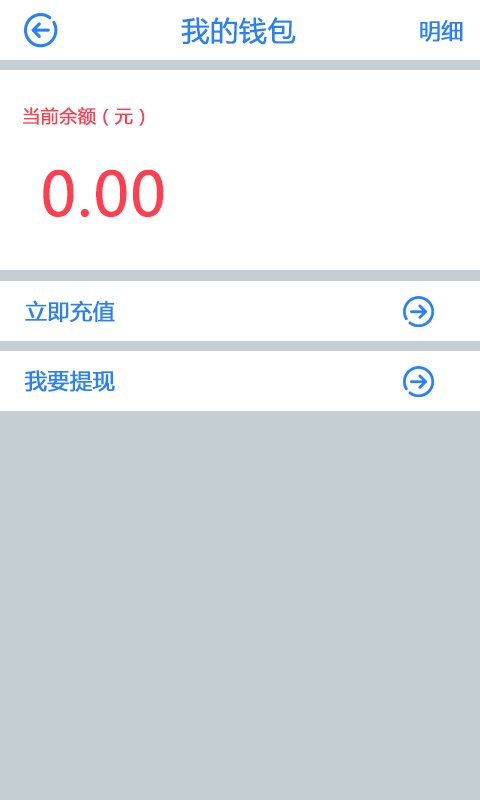
<style>
.page{position:relative;width:480px;height:800px;background:#c4ced3}
.page>*{position:absolute;margin:0}
.t1{font:28px "MicrosoftYaHei";color:#2681fc;font-weight:bold}
.t2{font:22px "MicrosoftYaHei";color:#2681fc;font-weight:bold}
.t3{font:18px "MicrosoftYaHei";color:#ff3e50;font-weight:bold}
.t4{font:60px "MicrosoftYaHei";color:#ff3e50;font-weight:bold}
</style>
<div class="page">
<p class="t1" style="left:181px;top:17px;width:115px;height:28px">我的钱包</p>
<p class="t2" style="left:420px;top:20px;width:43px;height:22px">明细</p>
<p class="t3" style="left:23px;top:107px;width:122px;height:19px">当前余额（元）</p>
<p class="t4" style="left:43px;top:169px;width:121px;height:48px">0.00</p>
<p class="t2" style="left:25px;top:300px;width:90px;height:23px">立即充值</p>
<p class="t2" style="left:24px;top:370px;width:91px;height:22px">我要提现</p>
</div>
